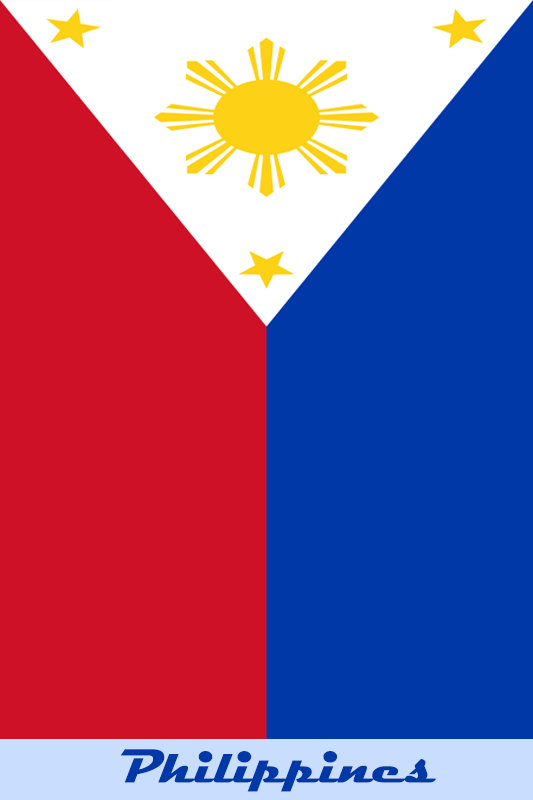
<style>
.page{position:relative;width:533px;height:800px;background:#0038a8}
.page>*{position:absolute;margin:0}
.t1{font:48px "Magneto-Bold";color:#0038a8;scale:1.08 1}
</style>
<div class="page">
<p class="t1" style="left:120px;top:749px;width:316px;height:43px">Philippines</p>
</div>
